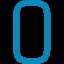
<style>
.page{position:relative;width:64px;height:64px;background:#000000}
.page>*{position:absolute;margin:0}
.t1{font:88px "MKSansTallX";color:#0a88ba}
</style>
<div class="page">
<p class="t1" style="left:13px;top:0px;width:38px;height:64px">0</p>
</div>
